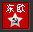
<style>
.page{position:relative;width:33px;height:32px;background:#c50000}
.page>*{position:absolute;margin:0}
.t1{font:10.4px "SimSun";color:#ffffff}
</style>
<div class="page">
<p class="t1" style="left:6px;top:4px;width:19px;height:9px">东欧</p>
</div>
